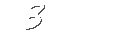
<style>
.page{position:relative;width:128px;height:32px;background:#ffffff}
.page>*{position:absolute;margin:0}
.t1{font:43px "DomDiagonalBT-Regular";letter-spacing:0.075em;color:#ffffff;scale:1.05 1}
</style>
<div class="page">
<p class="t1" style="left:24px;top:2px;width:21px;height:28px">3</p>
</div>
